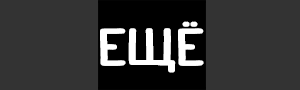
<style>
.page{position:relative;width:300px;height:90px;background:#333333}
.page>*{position:absolute;margin:0}
.t1{font:50px "HQYSaversText";letter-spacing:0.02em;color:#ffffff}
</style>
<div class="page">
<p class="t1" style="left:100px;top:21px;width:102px;height:52px">ЕЩЁ</p>
<p class="t1" style="left:102px;top:21px;width:102px;height:52px">ЕЩЁ</p>
</div>
